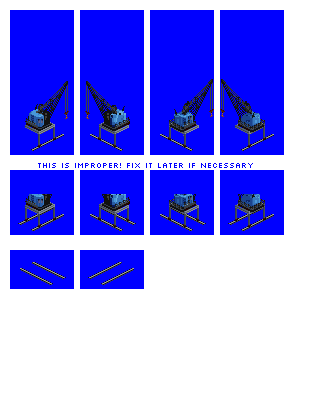
<style>
.page{position:relative;width:320px;height:400px;background:#ffffff}
.page>*{position:absolute;margin:0}
.t1{font:8px "Silkscreen";color:#0000ff}
</style>
<div class="page">
<p class="t1" style="left:38px;top:163px;width:215px;height:5px">THIS IS IMPROPER! Fix it later if necessary</p>
</div>
